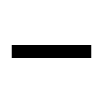
<style>
.page{position:relative;width:100px;height:100px;background:#ffffff}
.page>*{position:absolute;margin:0}
.t1{font:152.8px "CenturySchoolbook-Bold";color:#000000;scale:1.7 1}
</style>
<div class="page">
<p class="t1" style="left:11px;top:45px;width:81px;height:13px">-</p>
</div>
